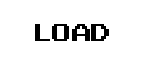
<style>
.page{position:relative;width:144px;height:64px;background:#ffffff}
.page>*{position:absolute;margin:0}
.t1{font:33.3px "#ZFTerminal";color:#000000}
</style>
<div class="page">
<p class="t1" style="left:35px;top:24px;width:74px;height:17px">LOAD</p>
</div>
